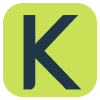
<style>
.page{position:relative;width:100px;height:100px;background:#cae157}
.page>*{position:absolute;margin:0}
.t1{font:100px "JSDongkang-Bold";color:#203845}
</style>
<div class="page">
<p class="t1" style="left:23px;top:15px;width:59px;height:75px">K</p>
</div>
